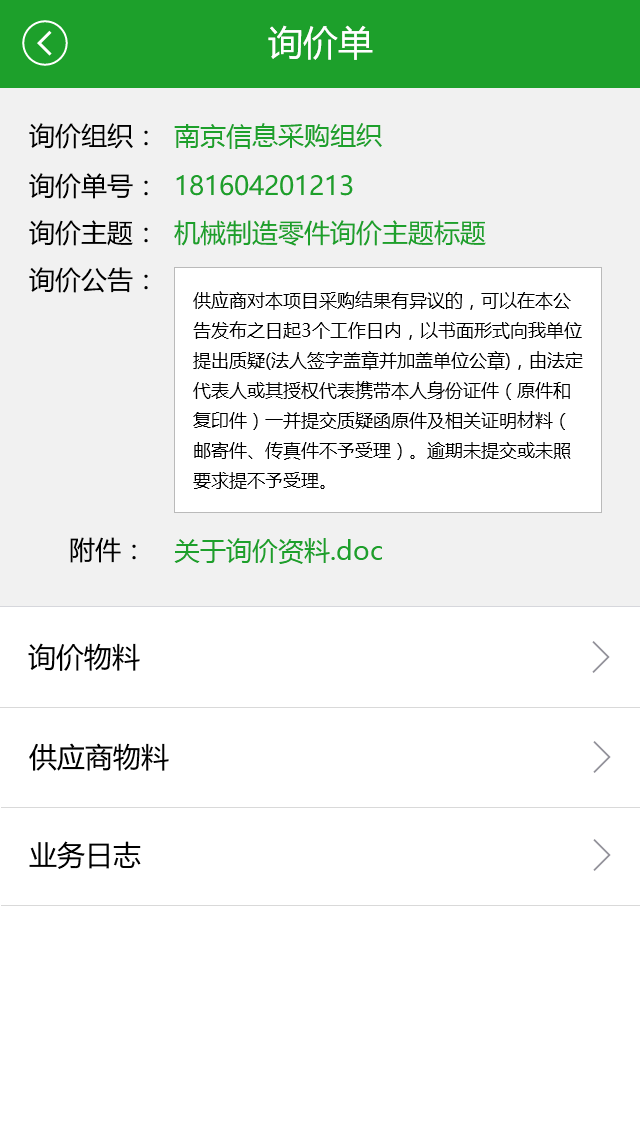
<style>
.page{position:relative;width:640px;height:1136px;background:#ffffff}
.page>*{position:absolute;margin:0}
.t1{font:35px "MicrosoftYaHei";color:#ffffff}
.t2{font:26px "MicrosoftYaHei";color:#000000}
.t3{font:26px "MicrosoftYaHei";color:#1da02b}
.t4{font:18px/30px "MicrosoftYaHei";color:#000000}
.t5{font:28px "MicrosoftYaHei";color:#000000}
</style>
<div class="page">
<p class="t1" style="left:268px;top:25px;width:105px;height:35px">询价单</p>
<p class="t2" style="left:29px;top:123px;width:119px;height:26px">询价组织：</p>
<p class="t3" style="left:174px;top:123px;width:208px;height:26px">南京信息采购组织</p>
<p class="t2" style="left:29px;top:173px;width:119px;height:26px">询价单号：</p>
<p class="t3" style="left:176px;top:175px;width:177px;height:21px">181604201213</p>
<p class="t2" style="left:29px;top:220px;width:119px;height:26px">询价主题：</p>
<p class="t3" style="left:174px;top:220px;width:312px;height:26px">机械制造零件询价主题标题</p>
<p class="t2" style="left:29px;top:267px;width:119px;height:26px">询价公告：</p>
<p class="t4" style="left:193px;top:291px;width:390px;height:198px">供应商对本项目采购结果有异议的，可以在本公告发布之日起3个工作日内，以书面形式向我单位提出质疑(法人签字盖章并加盖单位公章)，由法定代表人或其授权代表携带本人身份证件（原件和复印件）一并提交质疑函原件及相关证明材料（邮寄件、传真件不予受理）。逾期未提交或未照要求提不予受理。</p>
<p class="t2" style="left:70px;top:537px;width:66px;height:26px">附件：</p>
<p class="t3" style="left:174px;top:538px;width:208px;height:26px">关于询价资料.doc</p>
<p class="t5" style="left:28px;top:643px;width:112px;height:28px">询价物料</p>
<p class="t5" style="left:29px;top:743px;width:140px;height:28px">供应商物料</p>
<p class="t5" style="left:29px;top:841px;width:112px;height:28px">业务日志</p>
</div>
